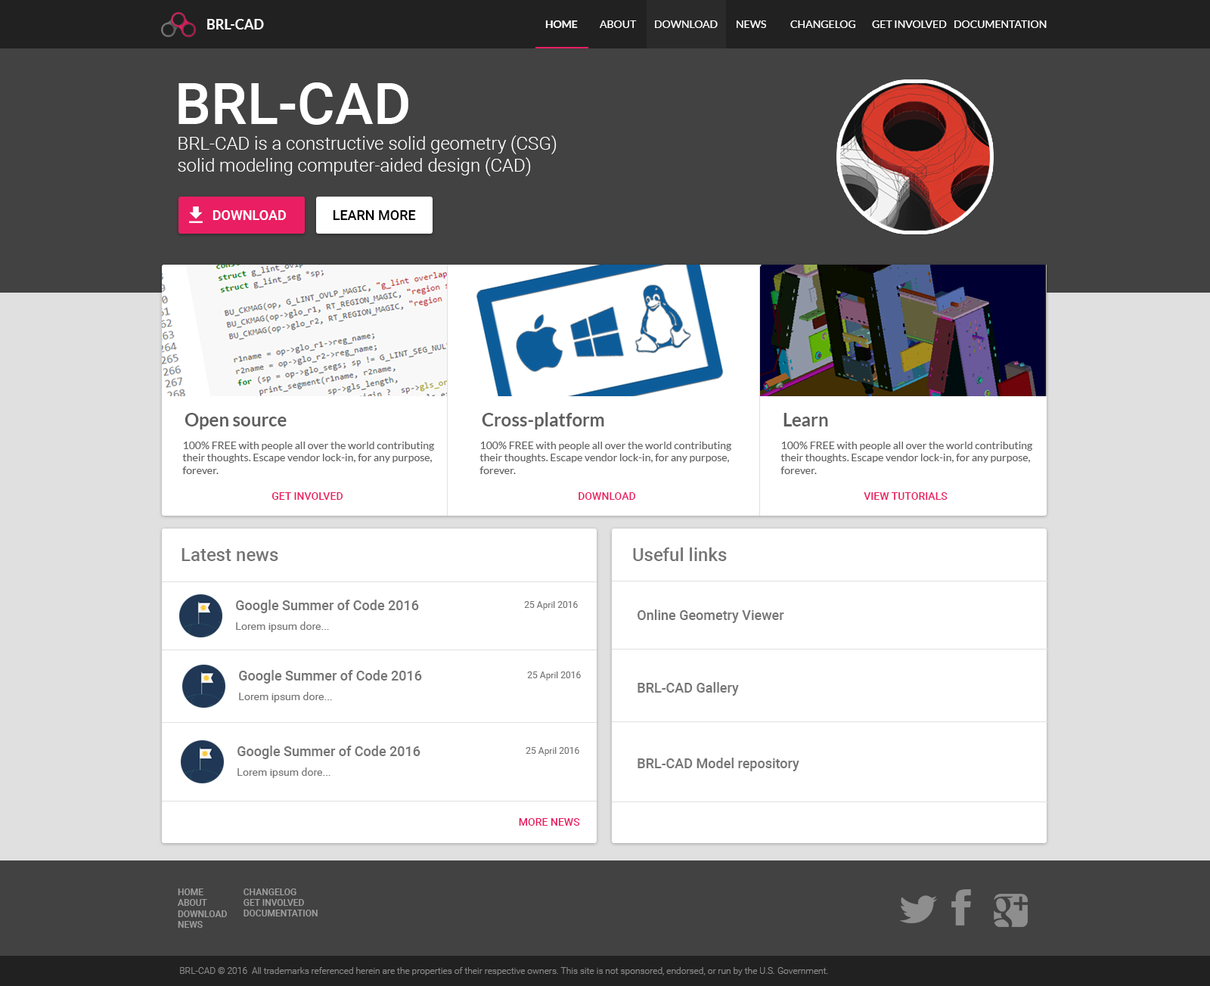
<style>
.page{position:relative;width:1210px;height:986px;background:#ffffff}
.page>*{position:absolute;margin:0}
.t1{font:13.6px "Lato-Bold";color:#ffffff}
.t2{font:10.6px "Lato-Regular";color:#ffffff}
.t3{font:10.6px "Lato-Bold";color:#ffffff}
.t4{font:57.8px "Roboto-Medium";color:#ffffff}
.t5{font:18.1px "Roboto-Light";color:#ffffff}
.t6{font:13.6px "Roboto-Medium";color:#ffffff}
.t7{font:13.6px "Roboto-Medium";color:#010101}
.t8{font:18.1px "Lato-Bold";color:#5e5e5e}
.t9{font:10.6px "Lato-Regular";color:#616161}
.t10{font:10.6px "Roboto-Medium";color:#e91e63}
.t11{font:18.1px "Roboto-Medium";color:#757575}
.t12{font:13.6px "Roboto-Medium";color:#757575}
.t13{font:9.1px "Roboto-Regular";color:#757575}
.t14{font:10.6px "Roboto-Regular";color:#757575}
.t15{font:9.1px "Roboto-Medium";color:#9f9f9f}
.t16{font:9.1px "Roboto-Light";color:#898989}
</style>
<div class="page">
<p class="t1" style="left:207px;top:19px;width:57px;height:10px">BRL-CAD</p>
<p class="t2" style="left:545px;top:20px;width:501px;height:8px"><span class="t3">HOME</span> ABOUT DOWNLOAD NEWS CHANGELOG GET INVOLVED  DOCUMENTATION</p>
<p class="t4" style="left:178px;top:82px;width:230px;height:43px">BRL-CAD</p>
<p class="t5" style="left:178px;top:135px;width:378px;height:41px">BRL-CAD is a constructive solid geometry (CSG) solid modeling computer-aided design (CAD) system</p>
<p class="t6" style="left:212px;top:210px;width:74px;height:10px">DOWNLOAD</p>
<p class="t7" style="left:333px;top:210px;width:83px;height:10px">LEARN MORE</p>
<p class="t8" style="left:184px;top:413px;width:103px;height:16px">Open source</p>
<p class="t8" style="left:482px;top:412px;width:122px;height:17px">Cross-platform</p>
<p class="t8" style="left:783px;top:413px;width:45px;height:13px">Learn</p>
<p class="t9" style="left:182px;top:442px;width:253px;height:32px">100% FREE with people all over the world contributing their thoughts. Escape vendor lock-in, for any purpose, forever.</p>
<p class="t9" style="left:479px;top:442px;width:253px;height:32px">100% FREE with people all over the world contributing their thoughts. Escape vendor lock-in, for any purpose, forever.</p>
<p class="t9" style="left:780px;top:442px;width:253px;height:32px">100% FREE with people all over the world contributing their thoughts. Escape vendor lock-in, for any purpose, forever.</p>
<p class="t10" style="left:271px;top:492px;width:71px;height:8px">GET INVOLVED</p>
<p class="t10" style="left:578px;top:492px;width:57px;height:8px">DOWNLOAD</p>
<p class="t10" style="left:863px;top:492px;width:84px;height:8px">VIEW TUTORIALS</p>
<p class="t11" style="left:181px;top:548px;width:97px;height:13px">Latest news</p>
<p class="t11" style="left:633px;top:547px;width:94px;height:14px">Useful links</p>
<p class="t12" style="left:236px;top:600px;width:183px;height:13px">Google Summer of Code 2016</p>
<p class="t13" style="left:524px;top:601px;width:54px;height:9px">25 April 2016</p>
<p class="t12" style="left:637px;top:609px;width:147px;height:14px">Online Geometry Viewer</p>
<p class="t14" style="left:236px;top:621px;width:93px;height:11px">Lorem ipsum dore...</p>
<p class="t12" style="left:239px;top:670px;width:183px;height:13px">Google Summer of Code 2016</p>
<p class="t13" style="left:527px;top:671px;width:54px;height:9px">25 April 2016</p>
<p class="t12" style="left:637px;top:682px;width:102px;height:14px">BRL-CAD Gallery</p>
<p class="t14" style="left:239px;top:692px;width:93px;height:10px">Lorem ipsum dore...</p>
<p class="t12" style="left:237px;top:745px;width:183px;height:14px">Google Summer of Code 2016</p>
<p class="t13" style="left:525px;top:747px;width:54px;height:9px">25 April 2016</p>
<p class="t12" style="left:637px;top:758px;width:162px;height:13px">BRL-CAD Model repository</p>
<p class="t14" style="left:237px;top:767px;width:93px;height:11px">Lorem ipsum dore...</p>
<p class="t10" style="left:519px;top:818px;width:61px;height:8px">MORE NEWS</p>
<p class="t15" style="left:178px;top:888px;width:49px;height:40px">HOME<br>ABOUT<br>DOWNLOAD<br>NEWS</p>
<p class="t15" style="left:243px;top:888px;width:75px;height:28px">CHANGELOG<br>GET INVOLVED<br>DOCUMENTATION</p>
<p class="t16" style="left:180px;top:967px;width:648px;height:8px">BRL-CAD © 2016  All trademarks referenced herein are the properties of their respective owners. This site is not sponsored, endorsed, or run by the U.S. Government.</p>
</div>
